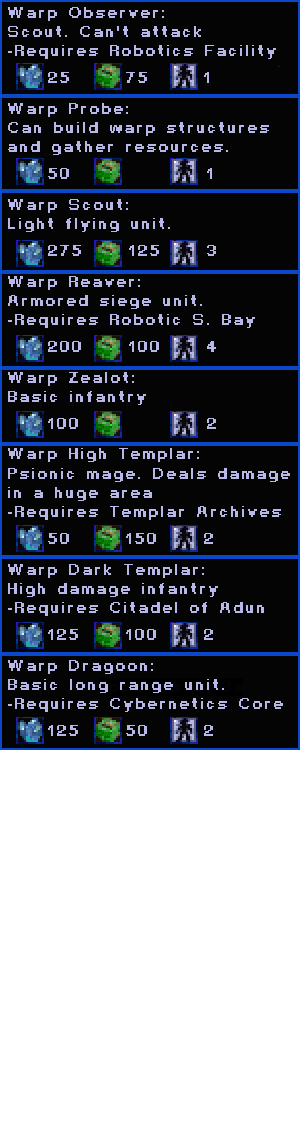
<style>
.page{position:relative;width:300px;height:1130px;background:#040404}
.page>*{position:absolute;margin:0}
.t1{font:16px "Starcraft-Ingamechat";color:#b8b8e8;font-weight:bold}
</style>
<div class="page">
<p class="t1" style="left:8px;top:7px;width:282px;height:705px">Warp Observer:<br>Scout. Can't attack<br>-Requires Robotics Facility<br><br><br>Warp Probe:<br>Can build warp structures<br>and gather resources.<br><br><br>Warp Scout:<br>Light flying unit.<br><br><br>Warp Reaver:<br>Armored siege unit.<br>-Requires Robotic S. Bay<br><br><br>Warp Zealot:<br>Basic infantry<br><br><br>Warp High Templar:<br>Psionic mage. Deals damage<br>in a huge area<br>-Requires Templar Archives<br><br><br>Warp Dark Templar:<br>High damage infantry<br>-Requires Citadel of Adun<br><br><br>Warp Dragoon:<br>Basic long range unit.<br>-Requires Cybernetics Core</p>
<p class="t1" style="left:48px;top:72px;width:168px;height:664px">25      75      1     <br><br><br><br><br>50               1<br><br><br><br>275     125     3<br><br><br><br><br>200     100     4<br><br><br><br>100              2<br><br><br><br><br><br>50      150     2<br><br><br><br><br>125     100     2<br><br><br><br><br>125     50      2</p>
</div>
